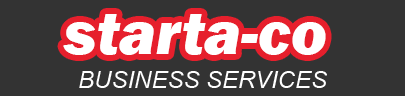
<style>
.page{position:relative;width:405px;height:96px;background:#333333}
.page>*{position:absolute;margin:0}
.t1{font:62.2px "FranklinGothic-HeavyItalic";color:#ffffff}
.t2{font:24px "Arial-ItalicMT";color:#ffffff}
</style>
<div class="page">
<p class="t1" style="left:63px;top:14px;width:263px;height:41px">starta-co</p>
<p class="t2" style="left:79px;top:71px;width:248px;height:17px">BUSINESS SERVICES</p>
</div>
